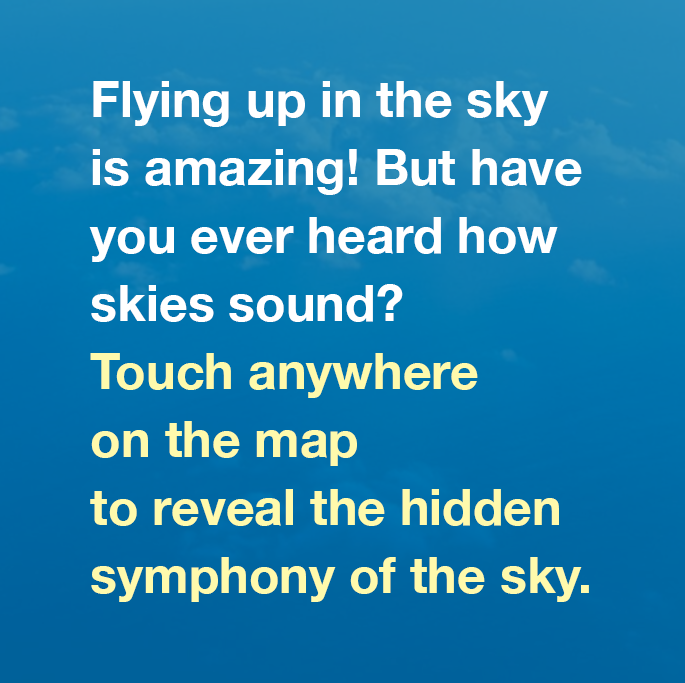
<style>
.page{position:relative;width:685px;height:683px}
.page>*{position:absolute;margin:0}
.t1{font:50px/68px "HelveticaNeue-Bold";color:#ffffff}
.t2{font:50px/68px "HelveticaNeue-Bold";color:#fffaac}
</style>
<div class="page">
<p class="t1" style="left:89px;top:81px;width:500px;height:521px">Flying up in the sky<br>is amazing! But have<br>you ever heard how<br>skies sound?<br><span class="t2">Touch anywhere<br>on the map<br>to reveal the hidden<br>symphony of the sky.</span></p>
</div>
